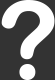
<style>
.page{position:relative;width:55px;height:80px;background:#333333}
.page>*{position:absolute;margin:0}
.t1{font:108px "ArialRoundedMTBold";color:#ffffff}
</style>
<div class="page">
<p class="t1" style="left:1px;top:0px;width:54px;height:80px">?</p>
</div>
